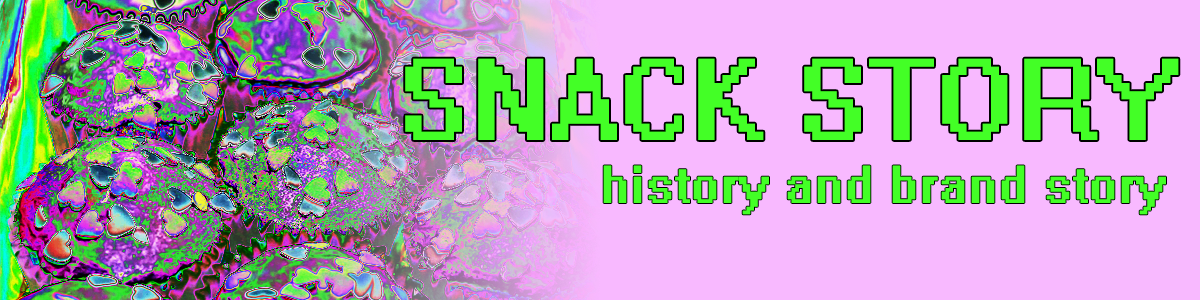
<style>
.page{position:relative;width:1200px;height:300px;background:#f8b9ff}
.page>*{position:absolute;margin:0}
.t1{font:130.2px "System";color:#43ff26}
.t2{font:60px "System";color:#43ff26}
</style>
<div class="page">
<p class="t1" style="left:405px;top:58px;width:774px;height:82px">SNACK STORY</p>
<p class="t2" style="left:603px;top:165px;width:563px;height:50px">history and brand story</p>
</div>
